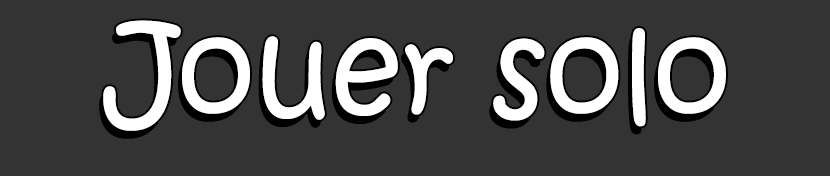
<style>
.page{position:relative;width:830px;height:176px;background:#333333}
.page>*{position:absolute;margin:0}
.t1{font:124.4px "KristenITC-Regular";color:#ffffff}
</style>
<div class="page">
<p class="t1" style="left:103px;top:20px;width:623px;height:111px">Jouer solo</p>
</div>
